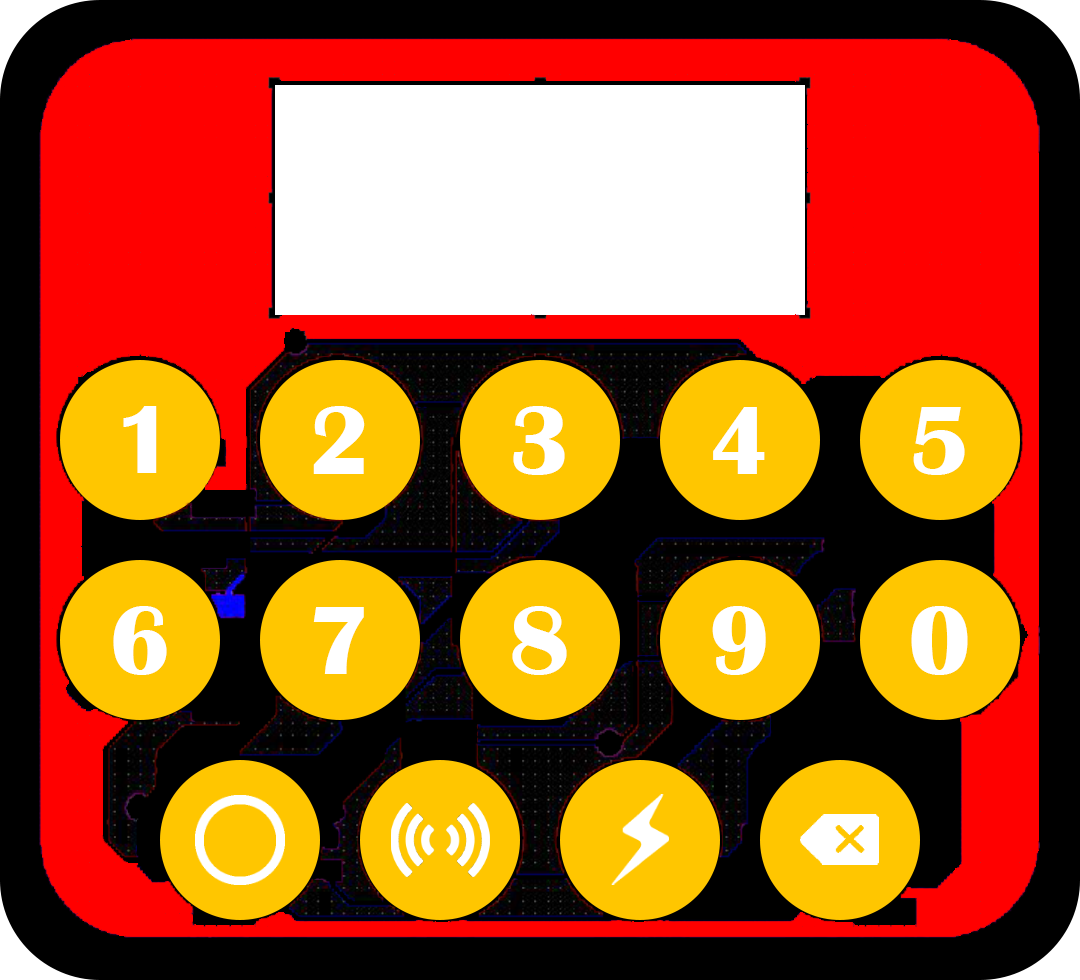
<style>
.page{position:relative;width:1080px;height:980px;background:#000000}
.page>*{position:absolute;margin:0}
.t1{font:100px "BritannicBold";color:#ffffff}
</style>
<div class="page">
<p class="t1" style="left:123px;top:406px;width:34px;height:67px">1</p>
<p class="t1" style="left:313px;top:406px;width:52px;height:68px">2</p>
<p class="t1" style="left:513px;top:406px;width:52px;height:69px">3</p>
<p class="t1" style="left:713px;top:407px;width:52px;height:67px">4</p>
<p class="t1" style="left:913px;top:407px;width:52px;height:68px">5</p>
<p class="t1" style="left:113px;top:606px;width:54px;height:69px">6</p>
<p class="t1" style="left:512px;top:606px;width:55px;height:69px">8</p>
<p class="t1" style="left:712px;top:606px;width:54px;height:69px">9</p>
<p class="t1" style="left:911px;top:606px;width:57px;height:69px">0</p>
<p class="t1" style="left:313px;top:607px;width:51px;height:67px">7</p>
</div>
